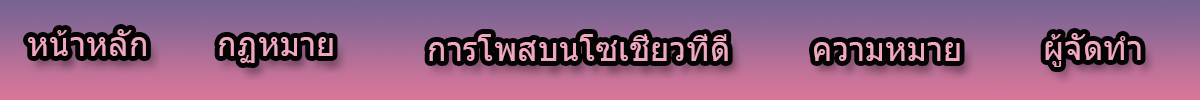
<style>
.page{position:relative;width:1200px;height:100px}
.page>*{position:absolute;margin:0}
.t1{font:33.3px "Tahoma";color:#f0a8c2}
</style>
<div class="page">
<p class="t1" style="left:28px;top:29px;width:118px;height:27px">หน้าหลัก</p>
<p class="t1" style="left:219px;top:37px;width:114px;height:26px">กฏหมาย</p>
<p class="t1" style="left:429px;top:34px;width:299px;height:27px">การโพสบนโซเช่ียวที่ดี</p>
<p class="t1" style="left:1045px;top:33px;width:96px;height:34px">ผู้จัดทำ</p>
<p class="t1" style="left:814px;top:42px;width:146px;height:19px">ความหมาย</p>
</div>
